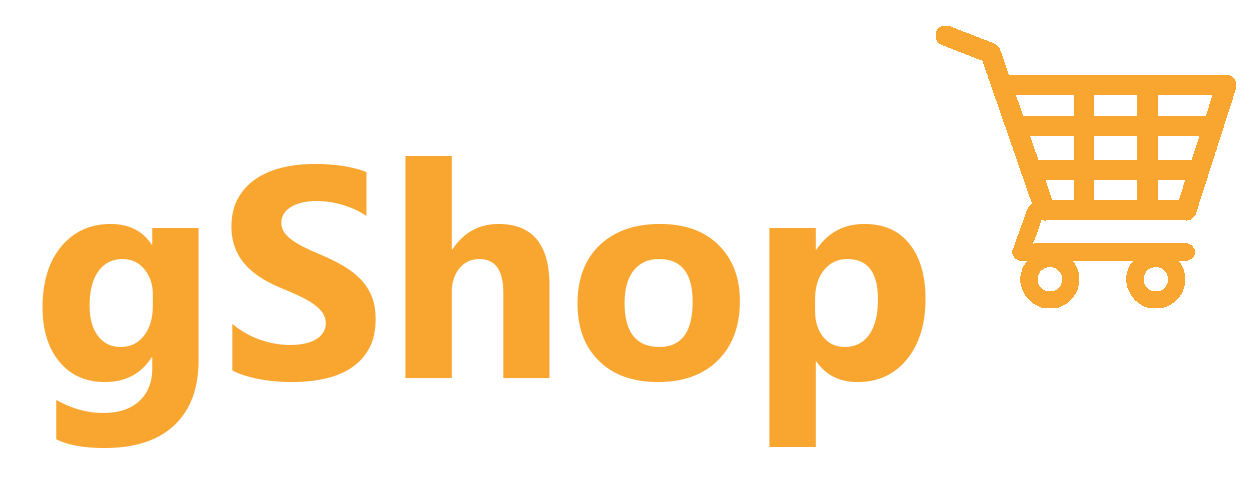
<style>
.page{position:relative;width:1252px;height:478px;background:#ffffff}
.page>*{position:absolute;margin:0}
.t1{font:300px "MicrosoftNewTaiLue-Bold";color:#f8a630}
</style>
<div class="page">
<p class="t1" style="left:42px;top:156px;width:884px;height:292px">gShop</p>
</div>
